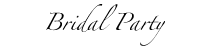
<style>
.page{position:relative;width:207px;height:55px;background:#ffffff}
.page>*{position:absolute;margin:0}
.t1{font:15.3px "Zapfino";color:#000000}
</style>
<div class="page">
<p class="t1" style="left:46px;top:4px;width:119px;height:42px;text-align:center">Bridal Party</p>
</div>
